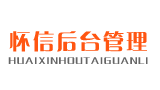
<style>
.page{position:relative;width:160px;height:90px;background:#ffffff}
.page>*{position:absolute;margin:0}
.t1{font:21.7px "FZCQJW--GB1-0";letter-spacing:0.08em;color:#ff5511}
.t2{font:10.4px "FZCQJW--GB1-0";letter-spacing:0.1em;color:#666666;text-transform:uppercase}
</style>
<div class="page">
<p class="t1" style="left:9px;top:31px;width:138px;height:21px">怀信后台管理</p>
<p class="t2" style="left:8px;top:57px;width:140px;height:7px">huaixinhoutaiguanli</p>
</div>
